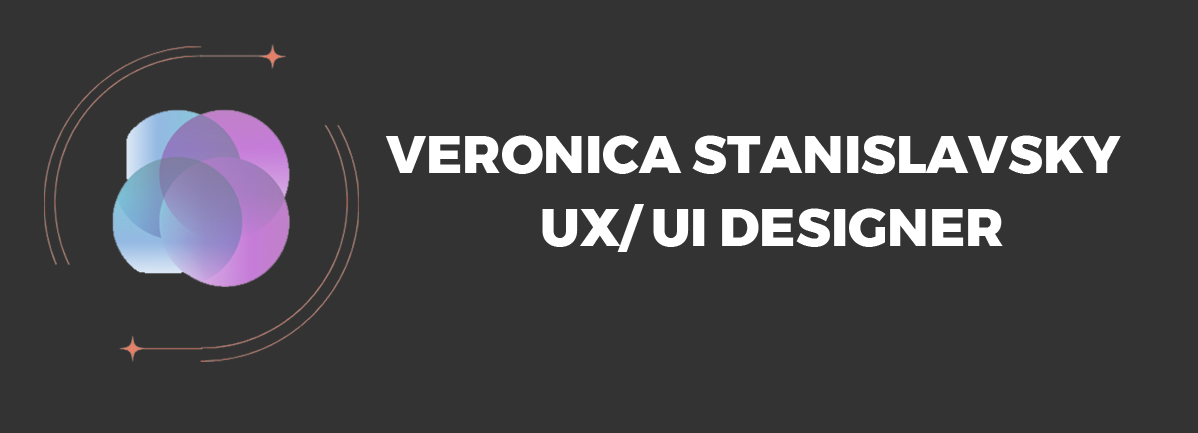
<style>
.page{position:relative;width:1198px;height:433px;background:#333333}
.page>*{position:absolute;margin:0}
.t1{font:53.2px "Montserrat-ExtraBold";color:#ffffff}
</style>
<div class="page">
<p class="t1" style="left:385px;top:135px;width:736px;height:39px">VERONICA STANISLAVSKY</p>
<p class="t1" style="left:542px;top:204px;width:461px;height:48px">UX/ UI DESIGNER</p>
</div>
